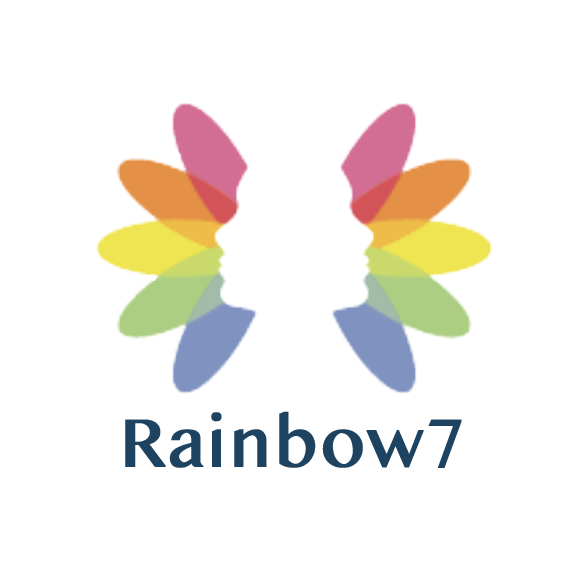
<style>
.page{position:relative;width:586px;height:588px;background:#ffffff}
.page>*{position:absolute;margin:0}
.t1{font:72px "SinhalaMN";color:#1e4361;font-weight:bold}
</style>
<div class="page">
<p class="t1" style="left:125px;top:411px;width:337px;height:57px">Rainbow7</p>
</div>
